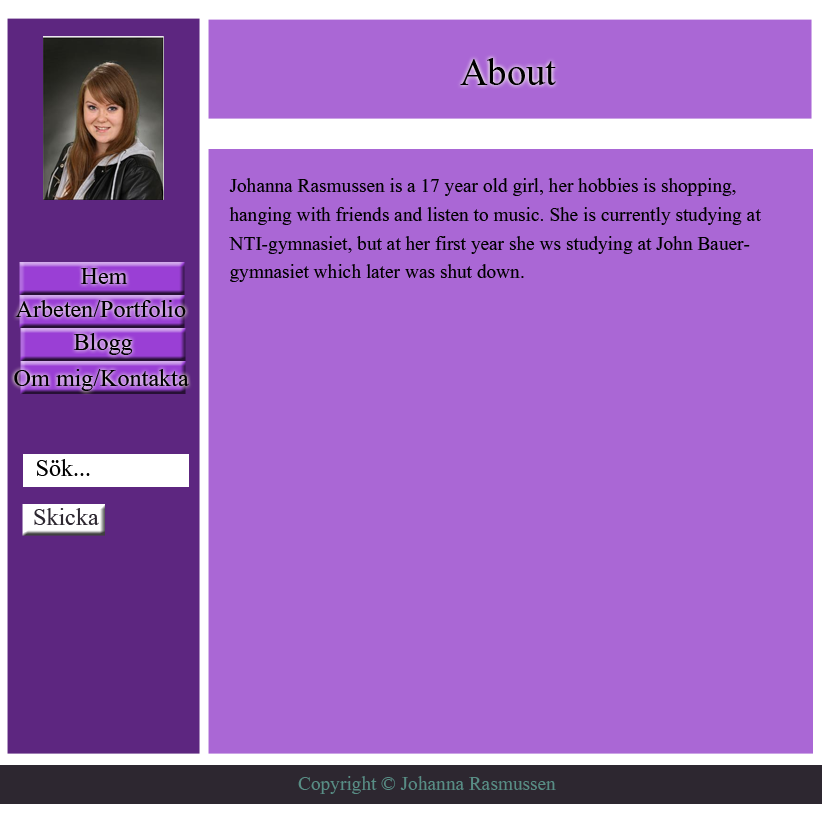
<style>
.page{position:relative;width:822px;height:822px;background:#aa67d5}
.page>*{position:absolute;margin:0}
.t1{font:48px "Aparajita";color:#000000}
.t2{font:24px "Aparajita";color:#000000}
.t3{font:30px "Aparajita";color:#000000}
.t4{font:30px "Aparajita";color:#2d2730}
.t5{font:24px "Aparajita";color:#588d85}
</style>
<div class="page">
<p class="t1" style="left:460px;top:58px;width:96px;height:27px">About</p>
<p class="t2" style="left:229px;top:178px;width:532px;height:104px">Johanna Rasmussen is a 17 year old girl, her hobbies is shopping, <br>hanging with friends and listen to music. She is currently studying at NTI-gymnasiet, but at her first year she ws studying at John Bauer-gymnasiet which later was shut down.</p>
<p class="t3" style="left:80px;top:268px;width:48px;height:16px">Hem</p>
<p class="t3" style="left:15px;top:300px;width:171px;height:17px">Arbeten/Portfolio</p>
<p class="t3" style="left:73px;top:333px;width:60px;height:22px">Blogg</p>
<p class="t3" style="left:14px;top:369px;width:175px;height:22px">Om mig/Kontakta</p>
<p class="t3" style="left:37px;top:459px;width:53px;height:17px">Sök...</p>
<p class="t4" style="left:34px;top:508px;width:65px;height:17px">Skicka</p>
<p class="t5" style="left:298px;top:776px;width:258px;height:18px">Copyright © Johanna Rasmussen</p>
</div>
